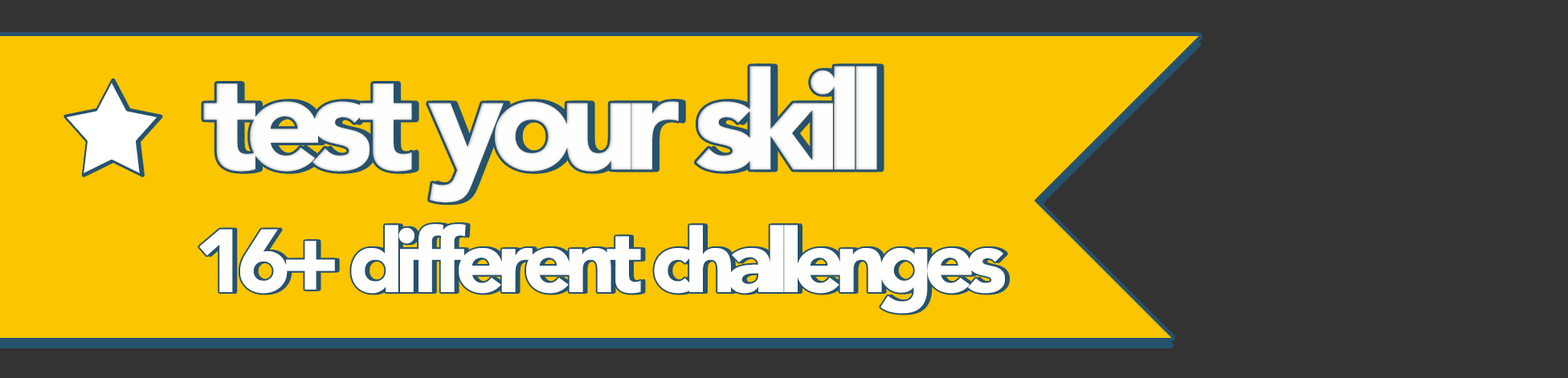
<style>
.page{position:relative;width:1568px;height:378px;background:#333333}
.page>*{position:absolute;margin:0}
.t1{font:136.6px "Avenir-Black";letter-spacing:-0.1em;color:#fefffd}
.t2{font:88.4px "Avenir-Black";letter-spacing:-0.1em;color:#fefffd}
</style>
<div class="page">
<p class="t1" style="left:203px;top:66px;width:674px;height:137px">test your skill</p>
<p class="t2" style="left:199px;top:224px;width:806px;height:90px">16+ different challenges</p>
</div>
